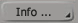
<style>
.page{position:relative;width:78px;height:23px;background:#9c9a98}
.page>*{position:absolute;margin:0}
.t1{font:11px "Tahoma";color:#242422;font-weight:bold}
</style>
<div class="page">
<p class="t1" style="left:16px;top:7px;width:35px;height:10px">Info ...</p>
</div>
